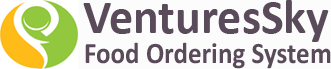
<style>
.page{position:relative;width:331px;height:69px;background:#fdfcfc}
.page>*{position:absolute;margin:0}
.t1{font:48px "Calibri-Bold";color:#5a4b5b}
.t2{font:29.8px "Calibri-Bold";color:#5a4b5b;scale:0.91 1}
</style>
<div class="page">
<p class="t1" style="left:83px;top:0px;width:246px;height:42px">VenturesSky</p>
<p class="t2" style="left:85px;top:42px;width:246px;height:27px">Food Ordering System</p>
</div>
